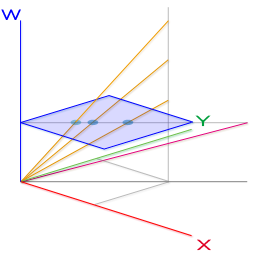
<style>
.page{position:relative;width:256px;height:256px;background:#ffffff}
.page>*{position:absolute;margin:0}
.t1{font:14.7px "PirulenRg-Regular";color:#0000ff}
.t2{font:14.4px "PirulenRg-Regular";color:#009f3c}
.t3{font:14.4px "PirulenRg-Regular";color:#df0024}
</style>
<div class="page">
<p class="t1" style="left:1px;top:9px;width:20px;height:11px">W</p>
<p class="t2" style="left:195px;top:115px;width:16px;height:12px">Y</p>
<p class="t3" style="left:197px;top:239px;width:14px;height:12px">X</p>
</div>
